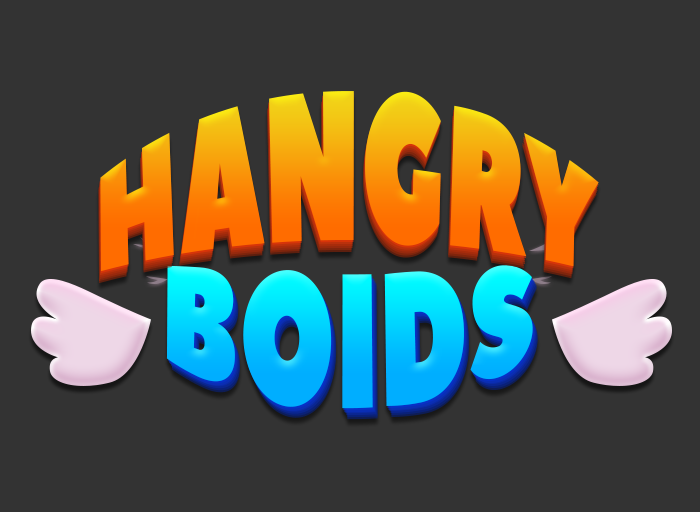
<style>
.page{position:relative;width:700px;height:512px;background:#333333}
.page>*{position:absolute;margin:0}
.t1{font:130px "PeaceSans";text-transform:uppercase;scale:0.85 1}
</style>
<div class="page">
<p class="t1" style="left:100px;top:91px;width:499px;height:181px">HANGRY</p>
<p class="t1" style="left:166px;top:265px;width:367px;height:144px">BOIDS</p>
</div>
